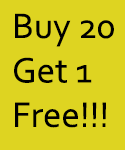
<style>
.page{position:relative;width:125px;height:150px;background:#ded421}
.page>*{position:absolute;margin:0}
.t1{font:37px "Corbel";color:#000000}
</style>
<div class="page">
<p class="t1" style="left:14px;top:13px;width:100px;height:115px">Buy 20<br>Get 1<br>Free!!!</p>
</div>
